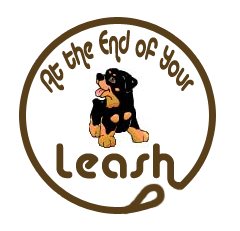
<style>
.page{position:relative;width:240px;height:231px;background:#ffffff}
.page>*{position:absolute;margin:0}
.t1{font:16px/33.3px "Alba";color:#593e1a;scale:0.72 1}
.t2{font:48px "Alba";color:#593e1a;font-weight:bold}
</style>
<div class="page">
<p class="t1" style="left:40px;top:30px;width:154px;height:63px;text-align:center">At the End of Your</p>
<p class="t2" style="left:56px;top:143px;width:126px;height:46px">Leash</p>
</div>
